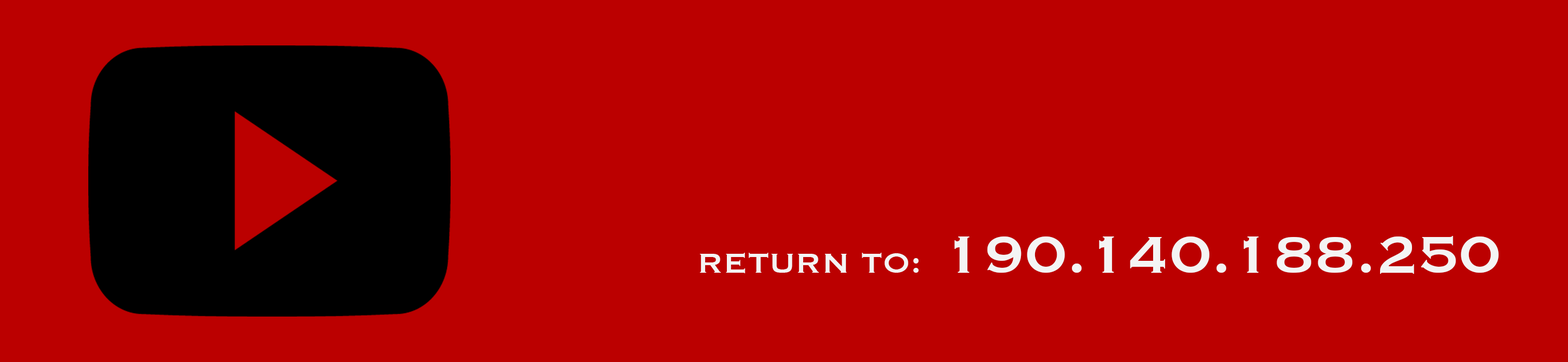
<style>
.page{position:relative;width:1568px;height:362px;background:#bb0000}
.page>*{position:absolute;margin:0}
.t1{font:67.7px "Copperplate";color:#f4f4f4}
.t2{font:36.1px "Copperplate";color:#f4f4f4}
</style>
<div class="page">
<p class="t1" style="left:700px;top:236px;width:799px;height:38px"><span class="t2">RETURN TO:</span> 190.140.188.250</p>
</div>
